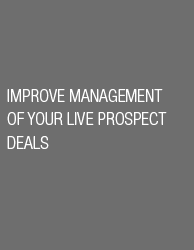
<style>
.page{position:relative;width:194px;height:250px;background:#6e6e6e}
.page>*{position:absolute;margin:0}
.t1{font:17.5px/23.4px "HelveticaNeueLTPro-LtCn";color:#ffffff}
</style>
<div class="page">
<p class="t1" style="left:7px;top:89px;width:160px;height:60px">IMPROVE MANAGEMENT<br>OF YOUR LIVE PROSPECT<br>DEALS</p>
</div>
